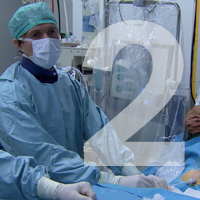
<style>
.page{position:relative;width:200px;height:200px}
.page>*{position:absolute;margin:0}
.t1{font:208.3px "PostGrotesk-Bold";color:#abb5c3}
</style>
<div class="page">
<p class="t1" style="left:82px;top:20px;width:103px;height:146px">2</p>
</div>
